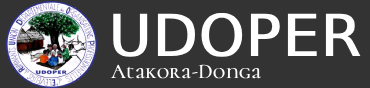
<style>
.page{position:relative;width:370px;height:88px;background:#333333}
.page>*{position:absolute;margin:0}
.t1{font:58px "DejaVuSans";color:#ffffff;font-weight:bold}
.t2{font:21px "CormorantUnicase-Regular";color:#ffffff;font-weight:bold}
</style>
<div class="page">
<p class="t1" style="left:113px;top:12px;width:248px;height:45px">UDOPER</p>
<p class="t2" style="left:110px;top:64px;width:152px;height:15px">Atakora-Donga</p>
</div>
